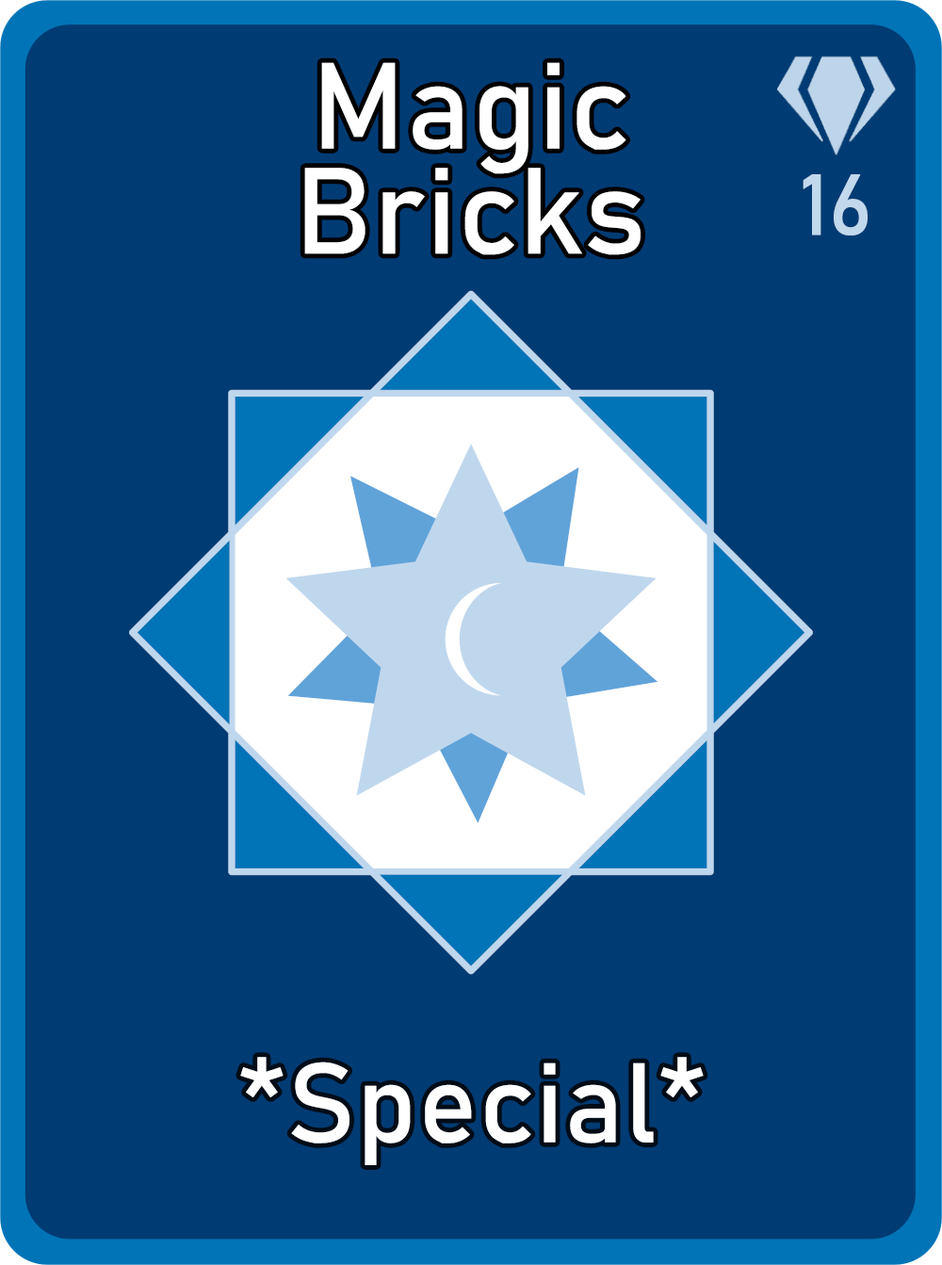
<style>
.page{position:relative;width:942px;height:1265px;background:#003b73}
.page>*{position:absolute;margin:0}
.t1{font:120.6px/105.1px "Bahnschrift";letter-spacing:0.01em;color:#ffffff}
.t2{font:85px "Bahnschrift";letter-spacing:0.01em;color:#c1d8ed}
.t3{font:111.3px "Bahnschrift";letter-spacing:0.01em;color:#ffffff}
</style>
<div class="page">
<p class="t1" style="left:304px;top:62px;width:337px;height:193px;text-align:center">Magic<br>Bricks</p>
<p class="t2" style="left:803px;top:174px;width:65px;height:62px">16</p>
<p class="t3" style="left:240px;top:1057px;width:464px;height:109px">*Special*</p>
</div>
